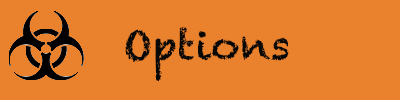
<style>
.page{position:relative;width:400px;height:100px;background:#e9812d}
.page>*{position:absolute;margin:0}
.t1{font:40px "Chalkduster";color:#070706}
</style>
<div class="page">
<p class="t1" style="left:125px;top:26px;width:164px;height:55px">Options</p>
</div>
